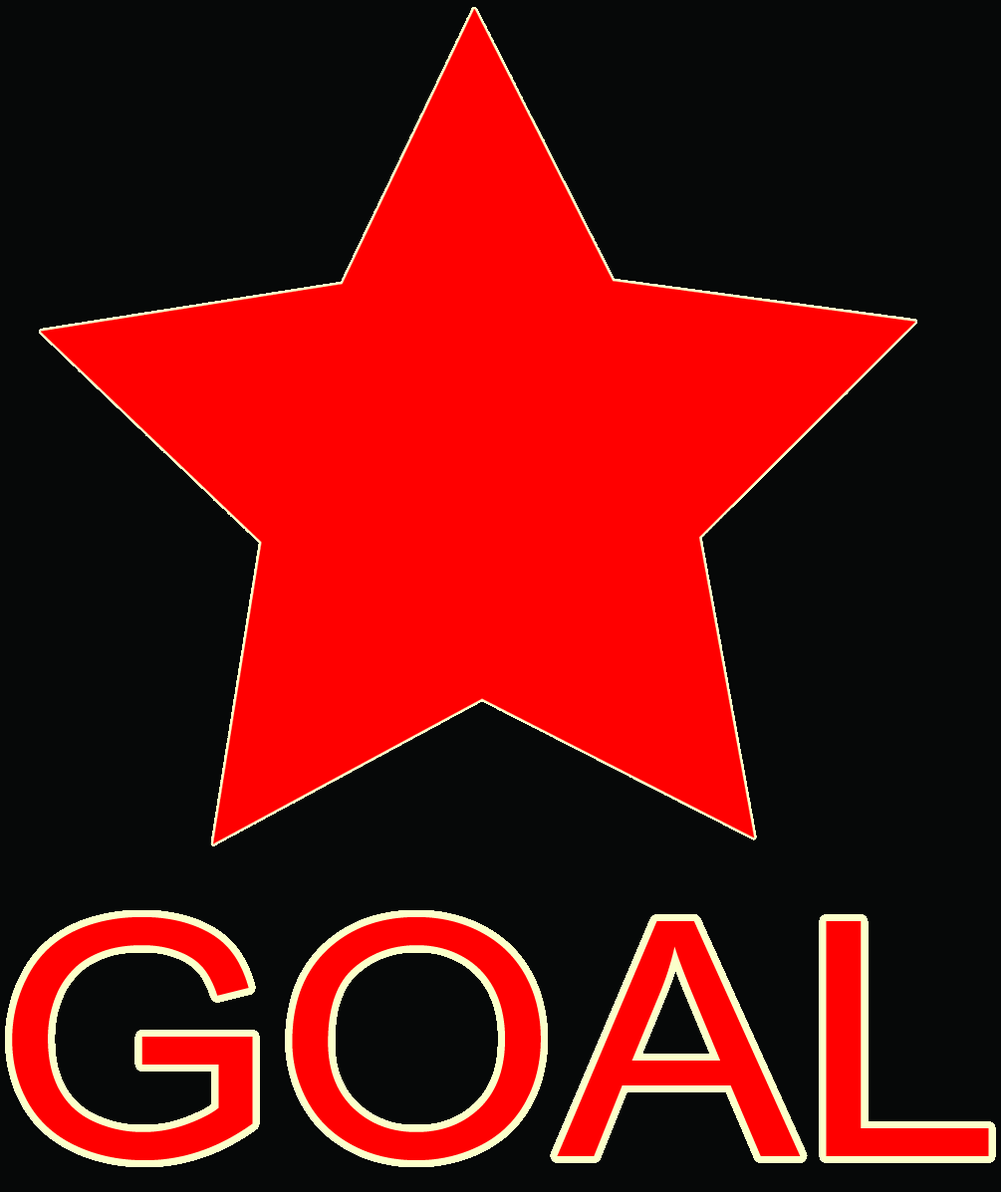
<style>
.page{position:relative;width:1001px;height:1192px;background:#060808}
.page>*{position:absolute;margin:0}
.t1{font:327.1px "ArialMT";color:#ff0000;scale:1.11 1}
</style>
<div class="page">
<p class="t1" style="left:12px;top:917px;width:977px;height:243px">GOAL</p>
</div>
